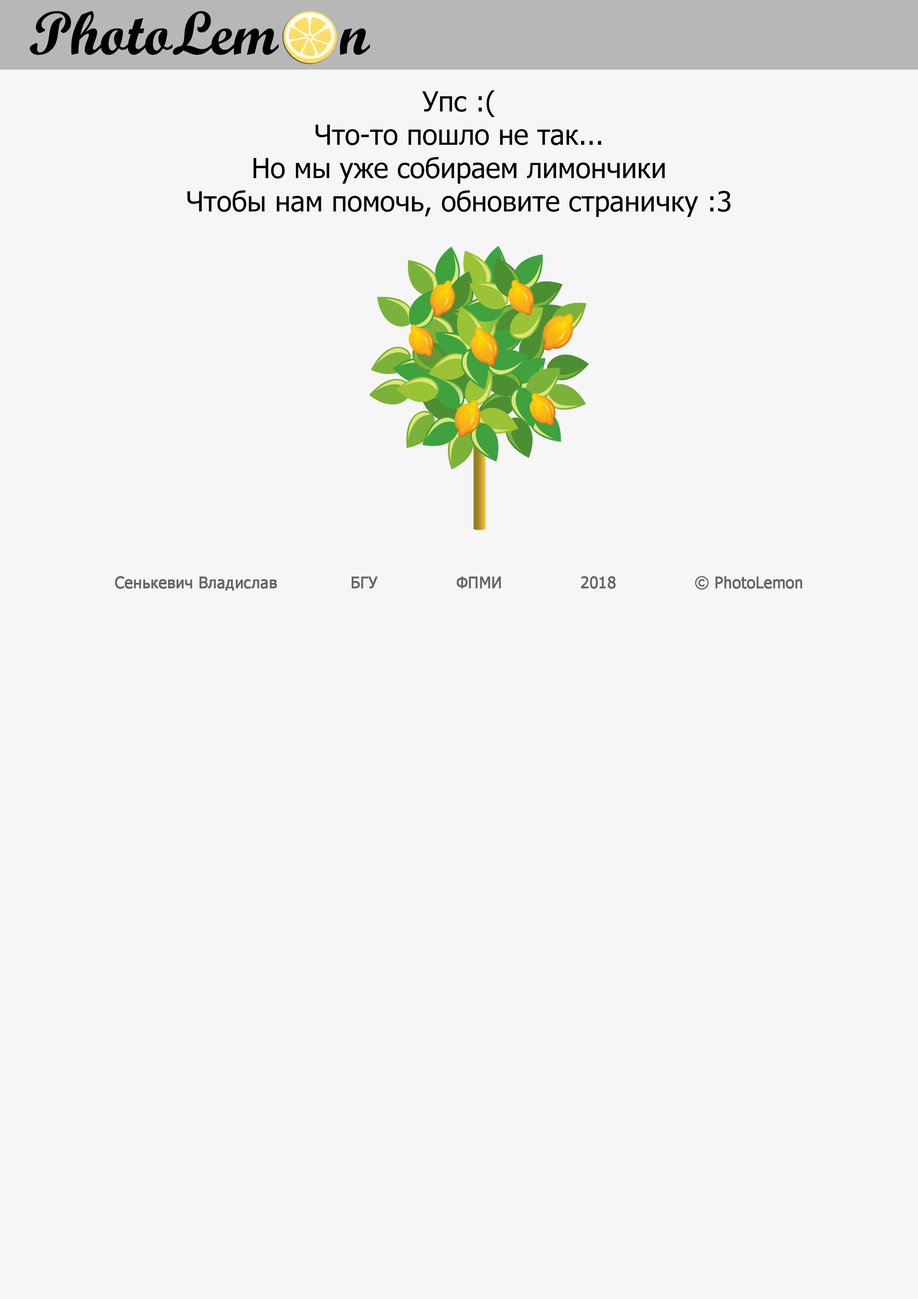
<style>
.page{position:relative;width:918px;height:1299px;background:#f6f6f6}
.page>*{position:absolute;margin:0}
.t1{font:61.7px "ScriptMTBold";color:#000000}
.t2{font:27.8px "Tahoma";color:#000000}
.t3{font:15.4px "Tahoma";color:#666666;font-weight:bold}
</style>
<div class="page">
<p class="t1" style="left:30px;top:11px;width:340px;height:44px">PhotoLem    n</p>
<p class="t2" style="left:187px;top:90px;width:544px;height:127px;text-align:center">Упс :(<br>Что-то пошло не так...<br>Но мы уже собираем лимончики<br>Чтобы нам помочь, обновите страничку :3</p>
<p class="t3" style="left:115px;top:576px;width:687px;height:15px">Cенькевич Владислав              БГУ               ФПМИ               2018               © PhotoLemon</p>
</div>
